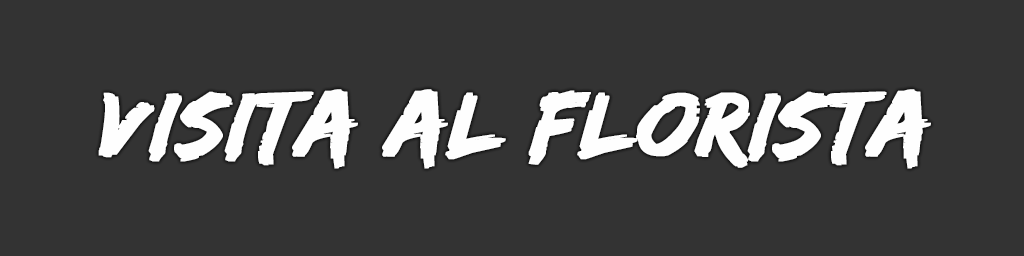
<style>
.page{position:relative;width:1024px;height:256px;background:#333333}
.page>*{position:absolute;margin:0}
.t1{font:94px "EdoSZ";color:#fefefe;font-weight:bold;font-style:italic;scale:1.04 1}
</style>
<div class="page">
<p class="t1" style="left:98px;top:89px;width:833px;height:80px">Visita al florista</p>
</div>
